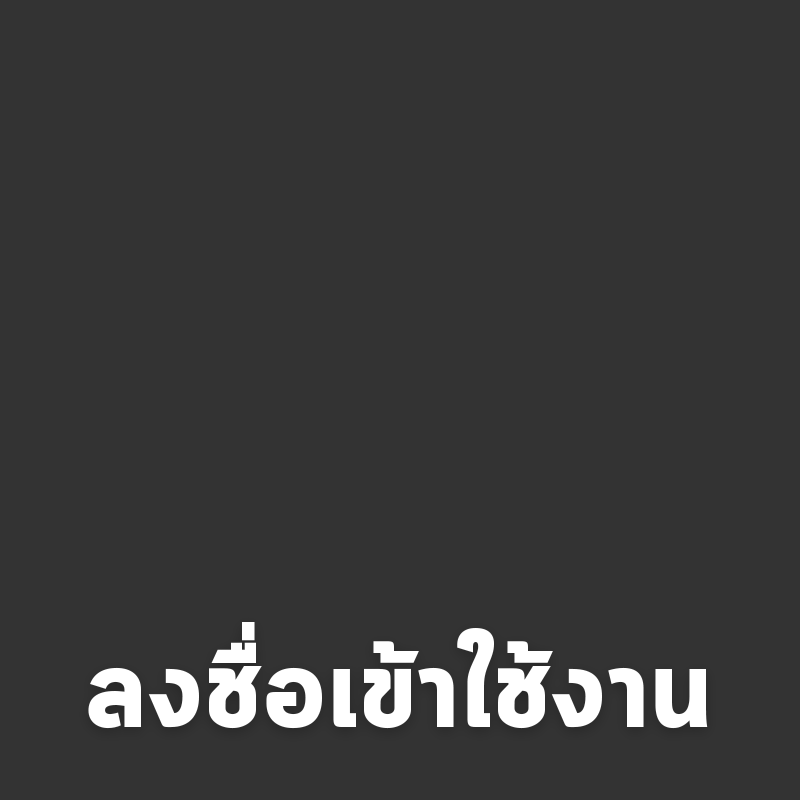
<style>
.page{position:relative;width:800px;height:800px;background:#333333}
.page>*{position:absolute;margin:0}
.t1{font:116.8px "Cloud-Bold";color:#ffffff}
</style>
<div class="page">
<p class="t1" style="left:88px;top:622px;width:620px;height:107px">ลงชื่อเข้าใช้งาน</p>
</div>
